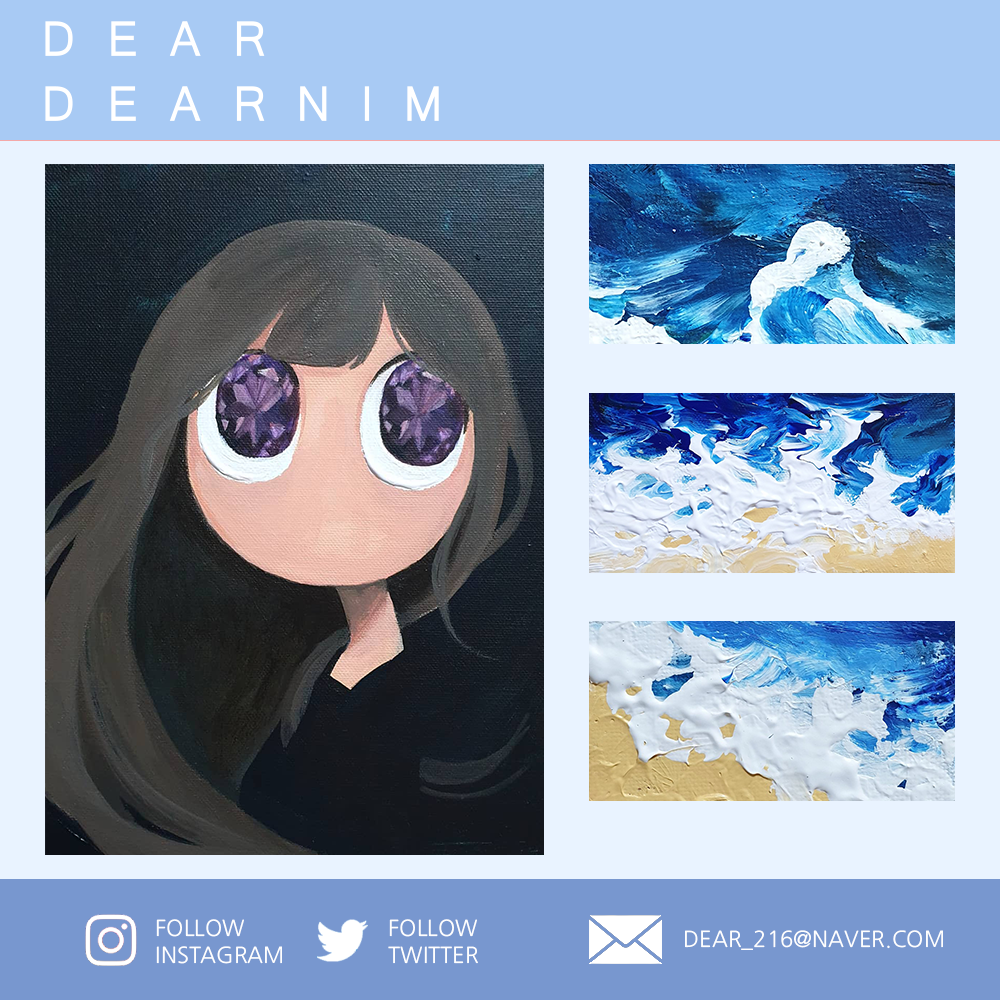
<style>
.page{position:relative;width:1000px;height:1000px}
.page>*{position:absolute;margin:0}
.t1{font:21.9px "NanumGothicOTF";color:#fefefe;text-transform:uppercase}
</style>
<div class="page">
<p class="t1" style="left:156px;top:919px;width:126px;height:45px">follow<br>instagram</p>
<p class="t1" style="left:388px;top:919px;width:90px;height:45px">follow<br>twitter</p>
<p class="t1" style="left:685px;top:930px;width:258px;height:20px">dear_216@naver.com</p>
</div>
